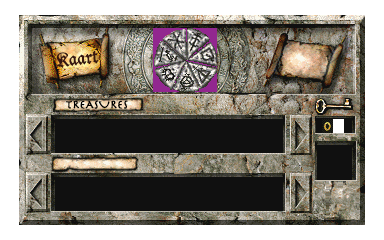
<style>
.page{position:relative;width:384px;height:240px;background:#ffffff}
.page>*{position:absolute;margin:0}
.t1{font:18.7px "DucDeBerry";color:#371710;font-weight:bold}
.t2{font:12px "HerculanumLTPro";color:#000000;font-weight:bold}
</style>
<div class="page">
<p class="t1" style="left:56px;top:50px;width:43px;height:18px;rotate:-6deg">Kaart</p>
<p class="t2" style="left:66px;top:100px;width:62px;height:9px">TREASURES</p>
</div>
